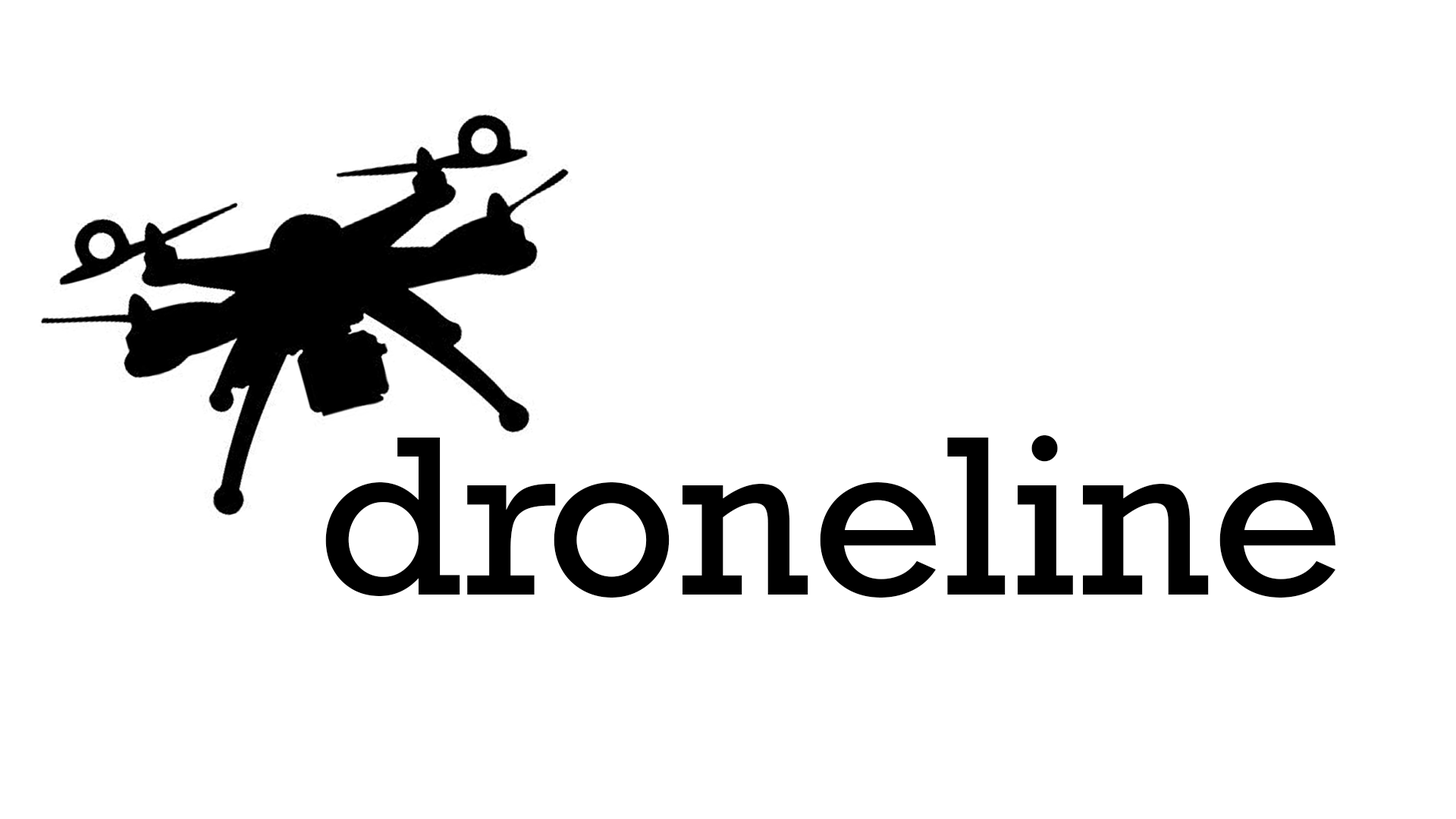
<style>
.page{position:relative;width:1456px;height:819px;background:#ffffff}
.page>*{position:absolute;margin:0}
.t1{font:213.2px "Rockwell-Regular";color:#000000}
</style>
<div class="page">
<p class="t1" style="left:325px;top:435px;width:1010px;height:163px">droneline</p>
</div>
